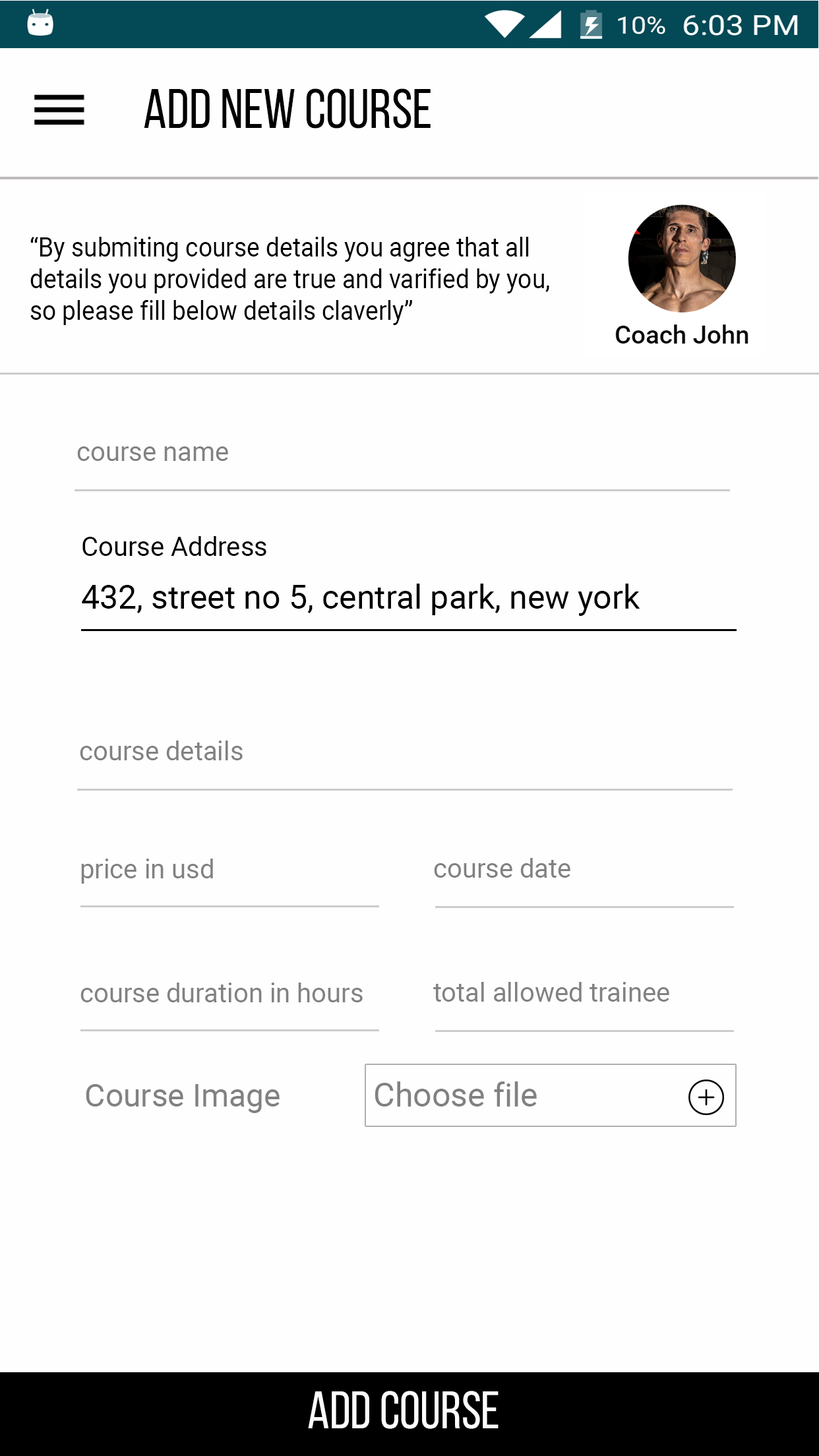
<style>
.page{position:relative;width:819px;height:1456px;background:#fefefe}
.page>*{position:absolute;margin:0}
.t1{font:56px "BebasNeueRegular";color:#010101}
.t2{font:26.4px "Roboto-Regular";color:#010101;scale:0.93 1}
.t3{font:26.4px "Roboto-Regular";color:#828181}
.t4{font:26.4px "Roboto-Regular";color:#000000}
.t5{font:33px "Roboto-Regular";color:#000000}
.t6{font:31.7px "Roboto-Regular";color:#828181}
.t7{font:33px "Roboto-Regular";color:#828181}
.t8{font:52.8px "BebasNeueRegular";color:#fefdfd}
</style>
<div class="page">
<p class="t1" style="left:144px;top:88px;width:287px;height:41px">Add New Course</p>
<p class="t2" style="left:30px;top:237px;width:519px;height:88px">“By submiting course details you agree that all <br>details you provided are true and varified by you,<br>so please fill below details claverly”</p>
<p class="t3" style="left:77px;top:446px;width:151px;height:15px">course name</p>
<p class="t4" style="left:82px;top:536px;width:184px;height:20px">Course Address</p>
<p class="t5" style="left:82px;top:584px;width:558px;height:32px">432, street no 5, central park, new york</p>
<p class="t3" style="left:80px;top:741px;width:163px;height:19px">course details</p>
<p class="t3" style="left:434px;top:858px;width:136px;height:20px">course date</p>
<p class="t3" style="left:81px;top:859px;width:132px;height:25px">price in usd</p>
<p class="t3" style="left:80px;top:983px;width:283px;height:19px">course duration in hours</p>
<p class="t3" style="left:433px;top:982px;width:236px;height:20px">total allowed trainee</p>
<p class="t6" style="left:86px;top:1084px;width:194px;height:29px">Course Image</p>
<p class="t7" style="left:375px;top:1081px;width:162px;height:25px">Choose file</p>
<p class="t8" style="left:308px;top:1391px;width:191px;height:38px">ADD COURSE</p>
</div>
